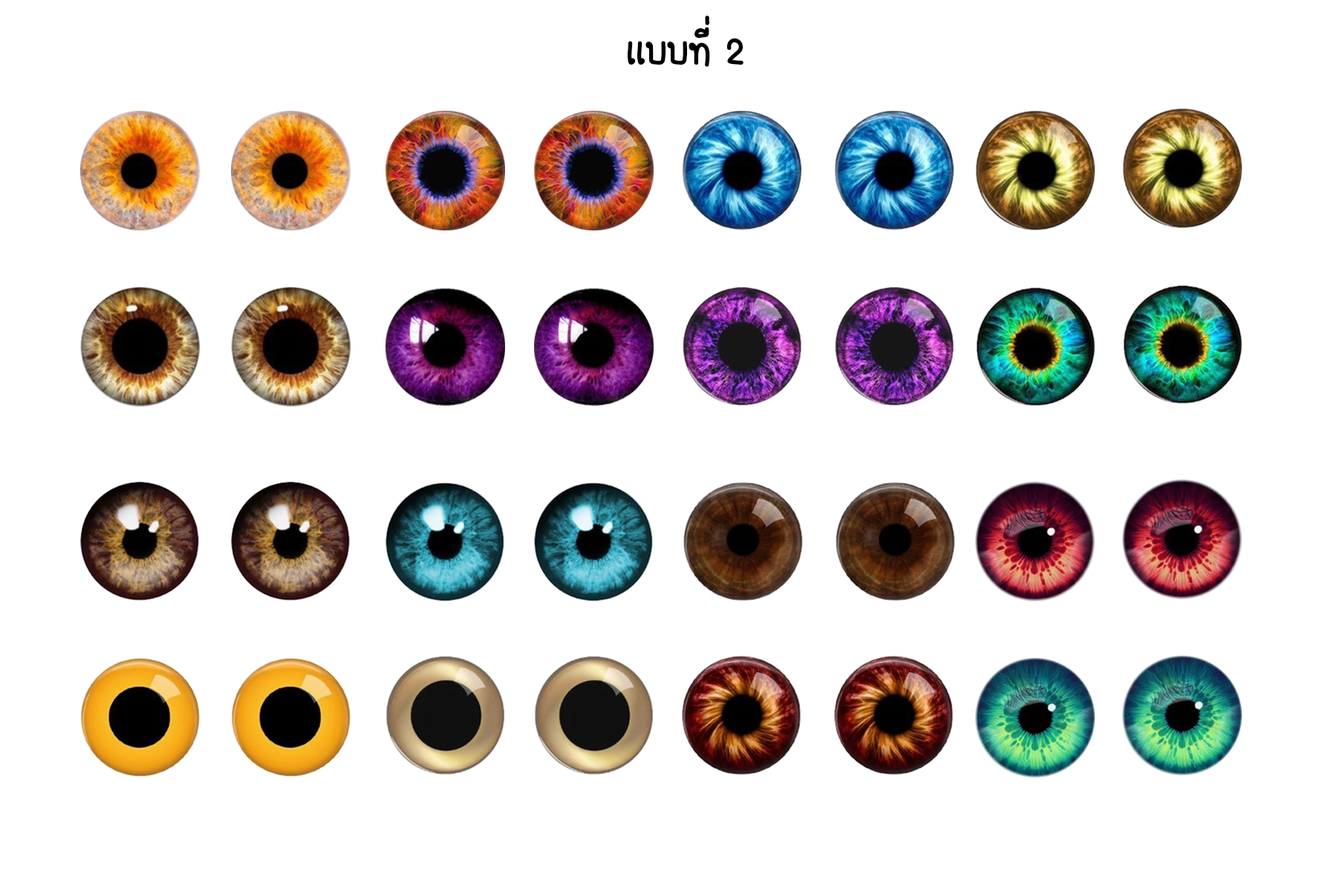
<style>
.page{position:relative;width:1337px;height:892px;background:#ffffff}
.page>*{position:absolute;margin:0}
.t1{font:55.7px "FCDaisyRegular";color:#000000}
</style>
<div class="page">
<p class="t1" style="left:627px;top:16px;width:117px;height:51px">เเบบที่ 2</p>
</div>
